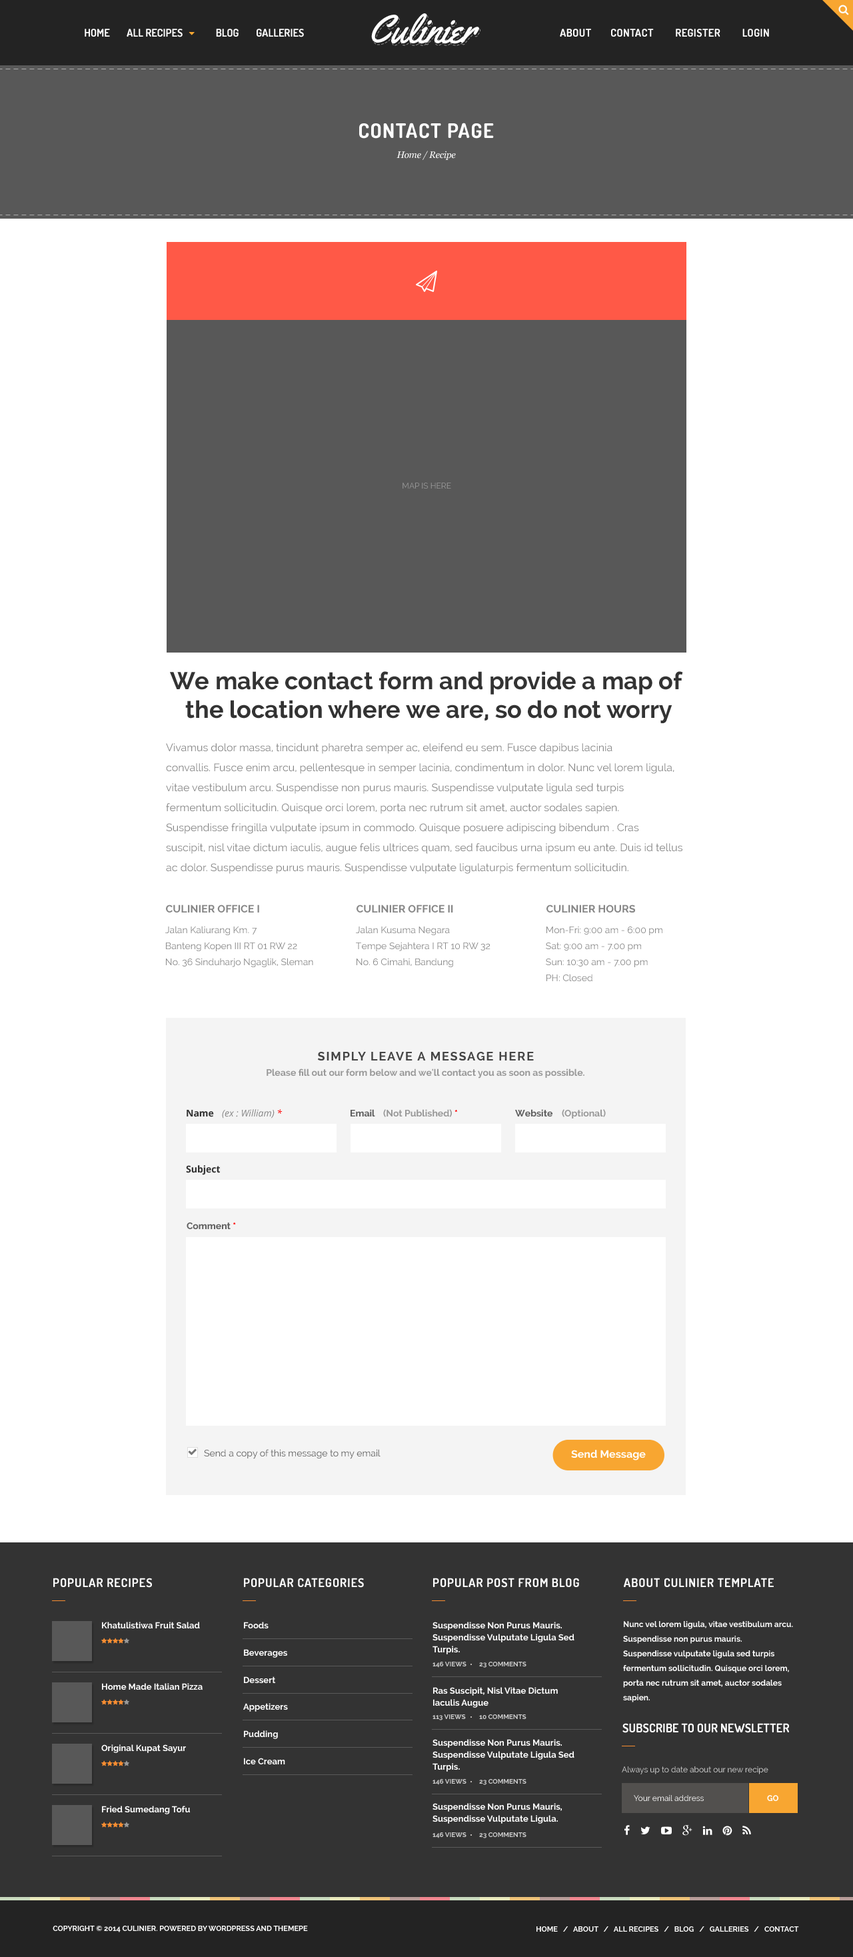
<style>
.page{position:relative;width:853px;height:1957px;background:#ffffff}
.page>*{position:absolute;margin:0}
.t1{font:40px "Yellowtail";color:#ffffff}
.t2{font:10.7px "Dosis-Bold";letter-spacing:0.025em;color:#ffffff;text-transform:uppercase}
.t3{font:20px "Dosis-Bold";letter-spacing:0.05em;color:#ffffff;text-transform:uppercase}
.t4{font:9.3px "Georgia-Italic";letter-spacing:-0.025em;color:#ffffff}
.t5{font:8px "Raleway";color:#999999}
.t6{font:24px "Raleway-Bold";color:#333333}
.t7{font:10.7px/20px "Raleway";color:#878787}
.t8{font:10.7px "Raleway-Bold";color:#878787}
.t9{font:9.3px/16px "Raleway";color:#878787}
.t10{font:12px "Raleway-Bold";letter-spacing:0.1em;color:#444444;text-transform:uppercase}
.t11{font:9.3px "Raleway-Bold";color:#999999}
.t12{font:9.3px "OpenSans-Bold";color:#333333}
.t13{font:9.3px "OpenSans-Italic";color:#878787}
.t14{font:9.3px "OpenSans-Italic";color:#ff0000}
.t15{font:9.3px "Raleway-Bold";color:#5e5e5e}
.t16{font:9.3px "Raleway-Bold";color:#ff0000}
.t17{font:9.3px "Raleway-Bold";letter-spacing:-0.025em;color:#ff0000}
.t18{font:9.3px "Raleway";color:#5e5e5e}
.t19{font:10.7px "Raleway-Bold";color:#ffffff}
.t20{font:12px "Dosis-Bold";letter-spacing:0.05em;color:#ffffff;text-transform:uppercase}
.t21{font:8.7px "Raleway-Bold";color:#ffffff}
.t22{font:8.7px/12px "Raleway-Bold";color:#ffffff}
.t23{font:8px/14.7px "Raleway-Bold";color:#ffffff}
.t24{font:6.7px "Raleway-Bold";color:#cccccc;text-transform:uppercase}
.t25{font:12px "Dosis-Bold";letter-spacing:0.005em;color:#ffffff;text-transform:uppercase}
.t26{font:8px "Raleway";color:#dcdcdc}
.t27{font:8px "Raleway";color:#ffffff}
.t28{font:8px "Raleway-Bold";color:#ffffff}
.t29{font:7.3px "Raleway-Bold";color:#ffffff}
.t30{font:7.3px "Raleway-Bold";color:#ffffff;text-transform:uppercase}
</style>
<div class="page">
<p class="t1" style="left:371px;top:13px;width:108px;height:31px">Culinier</p>
<p class="t2" style="left:560px;top:29px;width:209px;height:8px">ABOUT        CONTACT         Register         login</p>
<p class="t3" style="left:359px;top:123px;width:135px;height:16px">CONTACT PAGE</p>
<p class="t4" style="left:397px;top:151px;width:59px;height:9px">Home / Recipe</p>
<p class="t5" style="left:403px;top:483px;width:48px;height:6px">MAP IS HERE</p>
<p class="t6" style="left:170px;top:671px;width:513px;height:52px;text-align:center">We make contact form and provide a map of <br>the location where we are, so do not worry</p>
<p class="t7" style="left:166px;top:743px;width:517px;height:131px">Vivamus dolor massa, tincidunt pharetra semper ac, eleifend eu sem. Fusce dapibus lacinia <br>convallis. Fusce enim arcu, pellentesque in semper lacinia, condimentum in dolor. Nunc vel lorem ligula, vitae vestibulum arcu. Suspendisse non purus mauris. Suspendisse vulputate ligula sed turpis <br>fermentum sollicitudin. Quisque orci lorem, porta nec rutrum sit amet, auctor sodales sapien. <br>Suspendisse fringilla vulputate ipsum in commodo. Quisque posuere adipiscing bibendum . Cras <br>suscipit, nisl vitae dictum iaculis, augue felis ultrices quam, sed faucibus urna ipsum eu ante. Duis id tellus ac dolor. Suspendisse purus mauris. Suspendisse vulputate ligulaturpis fermentum sollicitudin.</p>
<p class="t8" style="left:166px;top:905px;width:93px;height:8px">CULINIER OFFICE I</p>
<p class="t8" style="left:357px;top:905px;width:96px;height:8px">CULINIER OFFICE II</p>
<p class="t8" style="left:547px;top:905px;width:88px;height:8px">CULINIER HOURS</p>
<p class="t9" style="left:165px;top:926px;width:148px;height:41px">Jalan Kaliurang Km. 7<br>Banteng Kopen III RT 01 RW 22<br>No. 36 Sinduharjo Ngaglik, Sleman</p>
<p class="t9" style="left:356px;top:926px;width:135px;height:41px">Jalan Kusuma Negara<br>Tempe Sejahtera I RT 10 RW 32<br>No. 6 Cimahi, Bandung</p>
<p class="t9" style="left:546px;top:926px;width:117px;height:56px">Mon-Fri: 9:00 am - 6:00 pm<br>Sat: 9:00 am - 7.00 pm<br>Sun: 10:30 am - 7.00 pm<br>PH: Closed</p>
<p class="t10" style="left:318px;top:1052px;width:216px;height:9px">SIMPLY LEAVE A MESSAGE HERE</p>
<p class="t11" style="left:267px;top:1069px;width:318px;height:10px">Please fill out our form below and we'll contact you as soon as possible.</p>
<p class="t12" style="left:187px;top:1110px;width:27px;height:7px">Name</p>
<p class="t13" style="left:222px;top:1109px;width:61px;height:10px">(ex : William) <span class="t14">*</span></p>
<p class="t15" style="left:351px;top:1109px;width:24px;height:8px">Email</p>
<p class="t11" style="left:383px;top:1109px;width:74px;height:8px">(Not Published) <span class="t16">*</span></p>
<p class="t15" style="left:515px;top:1109px;width:38px;height:8px">Website</p>
<p class="t11" style="left:562px;top:1109px;width:44px;height:10px">(Optional)</p>
<p class="t12" style="left:186px;top:1165px;width:34px;height:10px">Subject</p>
<p class="t15" style="left:187px;top:1223px;width:49px;height:7px">Comment <span class="t17">*</span></p>
<p class="t18" style="left:204px;top:1449px;width:177px;height:10px">Send a copy of this message to my email</p>
<p class="t19" style="left:571px;top:1450px;width:75px;height:11px">Send Message</p>
<p class="t20" style="left:53px;top:1578px;width:99px;height:10px">POPULAR RECIPES</p>
<p class="t20" style="left:244px;top:1578px;width:120px;height:10px">POPULAR CATEGORIES</p>
<p class="t20" style="left:433px;top:1578px;width:146px;height:10px">POPULAR Post from blog</p>
<p class="t20" style="left:624px;top:1578px;width:150px;height:9px">About CULINIER Template</p>
<p class="t21" style="left:102px;top:1622px;width:98px;height:7px">Khatulistiwa Fruit Salad</p>
<p class="t21" style="left:244px;top:1622px;width:25px;height:7px">Foods</p>
<p class="t22" style="left:433px;top:1622px;width:142px;height:33px">Suspendisse Non Purus Mauris. <br>Suspendisse Vulputate Ligula Sed <br>Turpis.</p>
<p class="t23" style="left:623px;top:1621px;width:170px;height:82px">Nunc vel lorem ligula, vitae vestibulum arcu. Suspendisse non purus mauris. <br>Suspendisse vulputate ligula sed turpis fermentum sollicitudin. Quisque orci lorem, porta nec rutrum sit amet, auctor sodales sapien.</p>
<p class="t21" style="left:244px;top:1649px;width:43px;height:9px">Beverages</p>
<p class="t24" style="left:433px;top:1662px;width:34px;height:6px">146 Views</p>
<p class="t24" style="left:479px;top:1662px;width:48px;height:6px">23 Comments</p>
<p class="t21" style="left:102px;top:1683px;width:101px;height:8px">Home Made Italian Pizza</p>
<p class="t21" style="left:244px;top:1677px;width:32px;height:7px">Dessert</p>
<p class="t22" style="left:433px;top:1687px;width:125px;height:21px">Ras Suscipit, Nisl Vitae Dictum <br>Iaculis Augue</p>
<p class="t21" style="left:243px;top:1703px;width:45px;height:9px">Appetizers</p>
<p class="t24" style="left:433px;top:1715px;width:33px;height:6px">113 Views</p>
<p class="t24" style="left:479px;top:1715px;width:48px;height:4px">10 Comments</p>
<p class="t21" style="left:244px;top:1731px;width:34px;height:8px">Pudding</p>
<p class="t25" style="left:623px;top:1723px;width:166px;height:10px">Subscribe to our newsletter</p>
<p class="t21" style="left:101px;top:1745px;width:85px;height:8px">Original Kupat Sayur</p>
<p class="t22" style="left:433px;top:1739px;width:142px;height:33px">Suspendisse Non Purus Mauris. <br>Suspendisse Vulputate Ligula Sed <br>Turpis.</p>
<p class="t21" style="left:244px;top:1758px;width:41px;height:7px">Ice Cream</p>
<p class="t26" style="left:622px;top:1767px;width:147px;height:8px">Always up to date about our new recipe</p>
<p class="t24" style="left:433px;top:1779px;width:34px;height:6px">146 Views</p>
<p class="t24" style="left:479px;top:1779px;width:48px;height:6px">23 Comments</p>
<p class="t21" style="left:102px;top:1806px;width:88px;height:9px">Fried Sumedang Tofu</p>
<p class="t22" style="left:433px;top:1803px;width:129px;height:21px">Suspendisse Non Purus Mauris, <br>Suspendisse Vulputate Ligula.</p>
<p class="t27" style="left:634px;top:1795px;width:70px;height:6px">Your email address</p>
<p class="t28" style="left:767px;top:1795px;width:12px;height:6px">GO</p>
<p class="t24" style="left:433px;top:1833px;width:34px;height:6px">146 Views</p>
<p class="t24" style="left:479px;top:1833px;width:48px;height:6px">23 Comments</p>
<p class="t29" style="left:53px;top:1926px;width:255px;height:7px">COPYRIGHT © 2014 CULINIER. POWERED BY WORDPRESS AND THEMEPE</p>
<p class="t30" style="left:537px;top:1927px;width:262px;height:5px">Home   /   About   /   All Recipes   /   Blog   /   Galleries   /   Contact</p>
</div>
